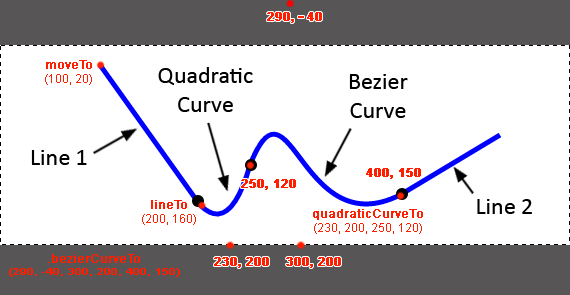
<style>
.page{position:relative;width:570px;height:295px;background:#ffffff}
.page>*{position:absolute;margin:0}
.t1{font:12px "Arial-BoldMT";color:#ff1e00;font-weight:bold}
.t2{font:14px "Arial-BoldMT";letter-spacing:0.22em;color:#ff1e00;font-weight:bold;scale:1.2 1}
.t3{font:12px "ArialMT";color:#ff1e00}
.t4{font:12px "ArialMT";color:#ff1e00;font-weight:bold}
.t5{font:10px "ArialMT";color:#ff1e00;font-weight:bold}
</style>
<div class="page">
<p class="t1" style="left:267px;top:12px;width:55px;height:11px">290, <span class="t2">-</span>40</p>
<p class="t3" style="left:45px;top:60px;width:47px;height:25px;text-align:center"><span class="t4">moveTo<br></span>(100, 20)</p>
<p class="t1" style="left:366px;top:168px;width:55px;height:11px">400, 150</p>
<p class="t1" style="left:241px;top:179px;width:55px;height:11px">250, 120</p>
<p class="t3" style="left:142px;top:200px;width:54px;height:25px;text-align:center"><span class="t4">lineTo<br></span>(200, 160)</p>
<p class="t3" style="left:313px;top:209px;width:110px;height:25px;text-align:center"><span class="t4">quadraticCurveTo<br></span>(230, 200, 250, 120)</p>
<p class="t5" style="left:9px;top:254px;width:171px;height:23px;text-align:center"><span class="t4">.bezierCurveTo<br></span>(290, -40, 300, 200, 400, 150)</p>
<p class="t1" style="left:214px;top:257px;width:55px;height:11px">230, 200</p>
<p class="t1" style="left:286px;top:257px;width:55px;height:11px">300, 200</p>
</div>
